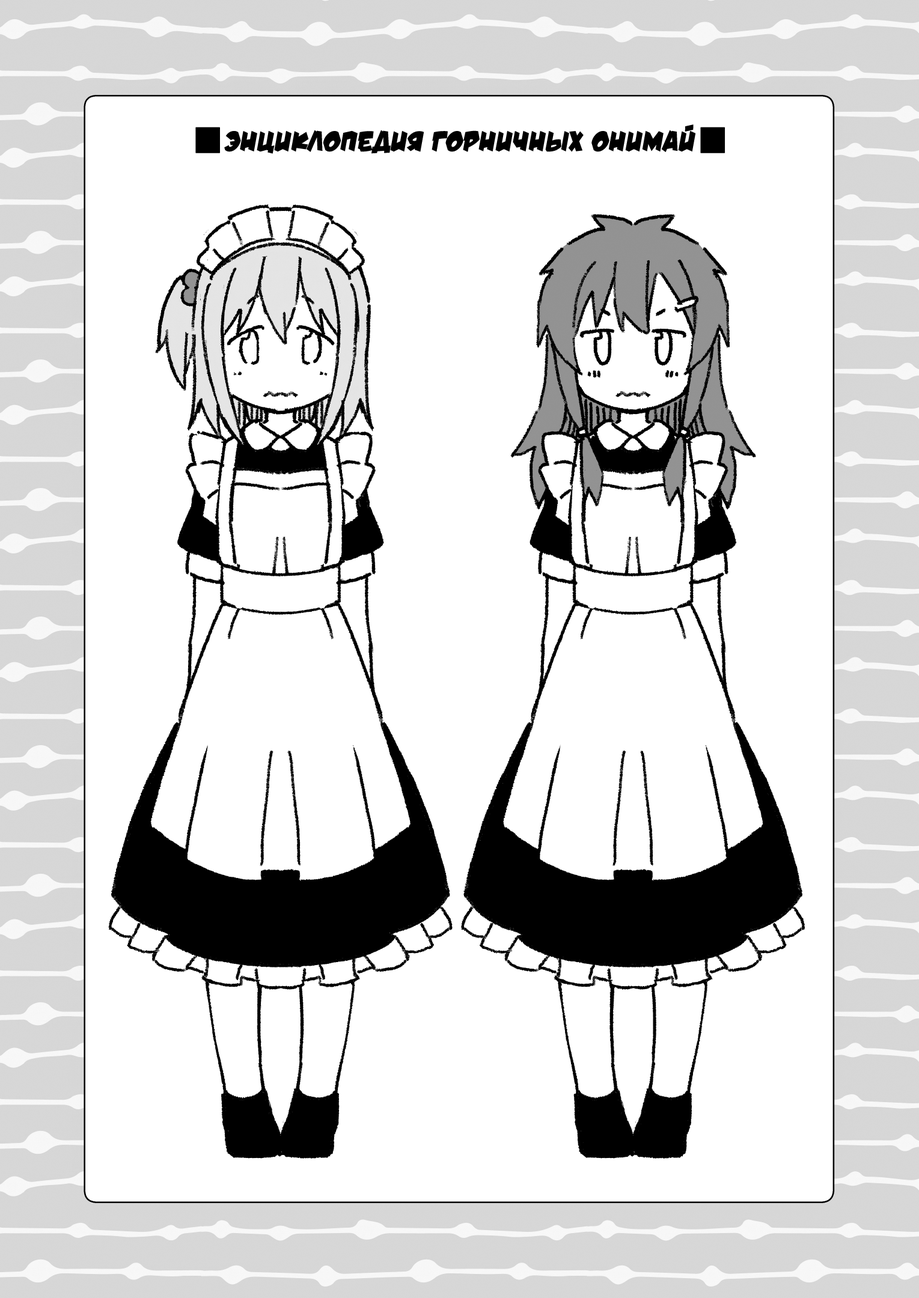
<style>
.page{position:relative;width:919px;height:1298px;background:#ffffff}
.page>*{position:absolute;margin:0}
.t1{font:28.8px "v_DamnNoisyKids";color:#000000;text-transform:uppercase}
</style>
<div class="page">
<p class="t1" style="left:224px;top:124px;width:472px;height:30px">Энциклопедия горничных Онимай</p>
</div>
